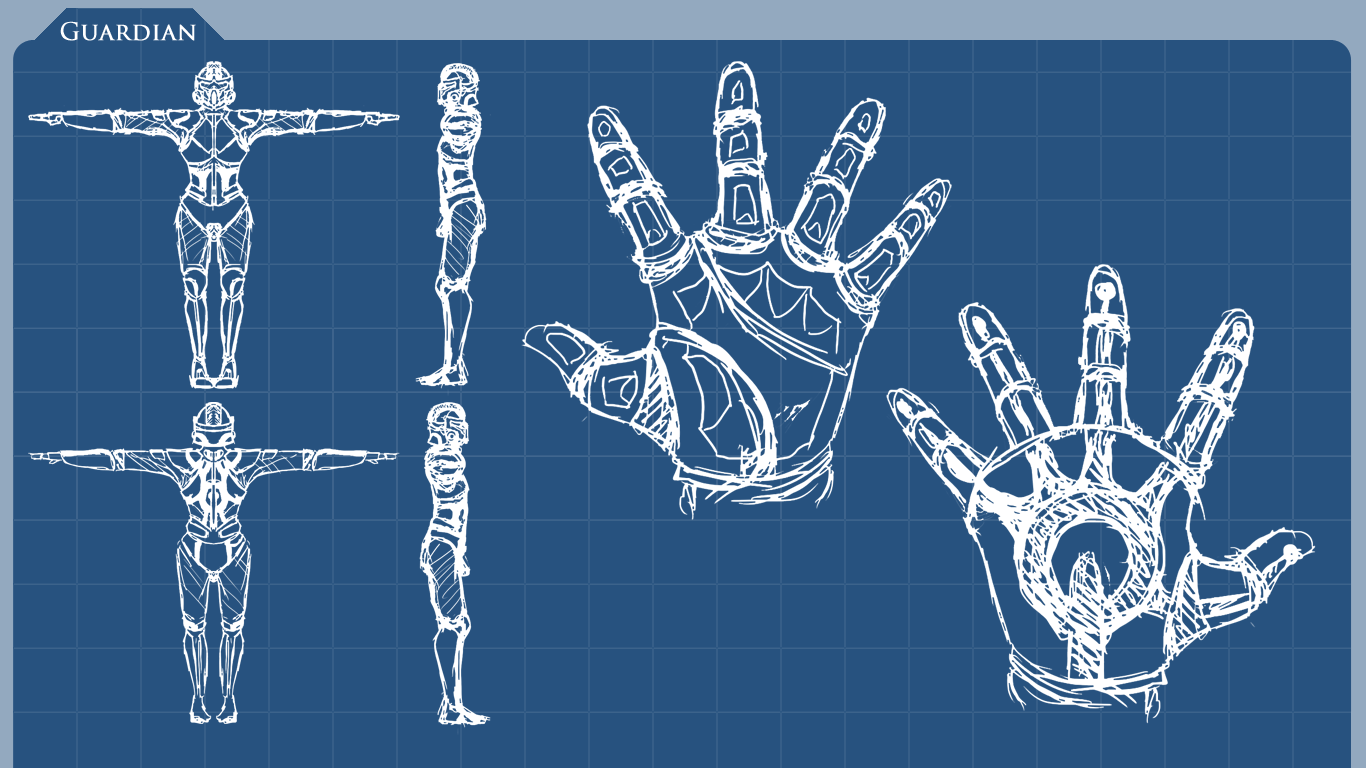
<style>
.page{position:relative;width:1366px;height:768px;background:#27527f}
.page>*{position:absolute;margin:0}
.t1{font:23.9px "TrajanPro-Regular";color:#ffffff;font-weight:bold}
</style>
<div class="page">
<p class="t1" style="left:60px;top:21px;width:136px;height:20px">Guardian</p>
</div>
